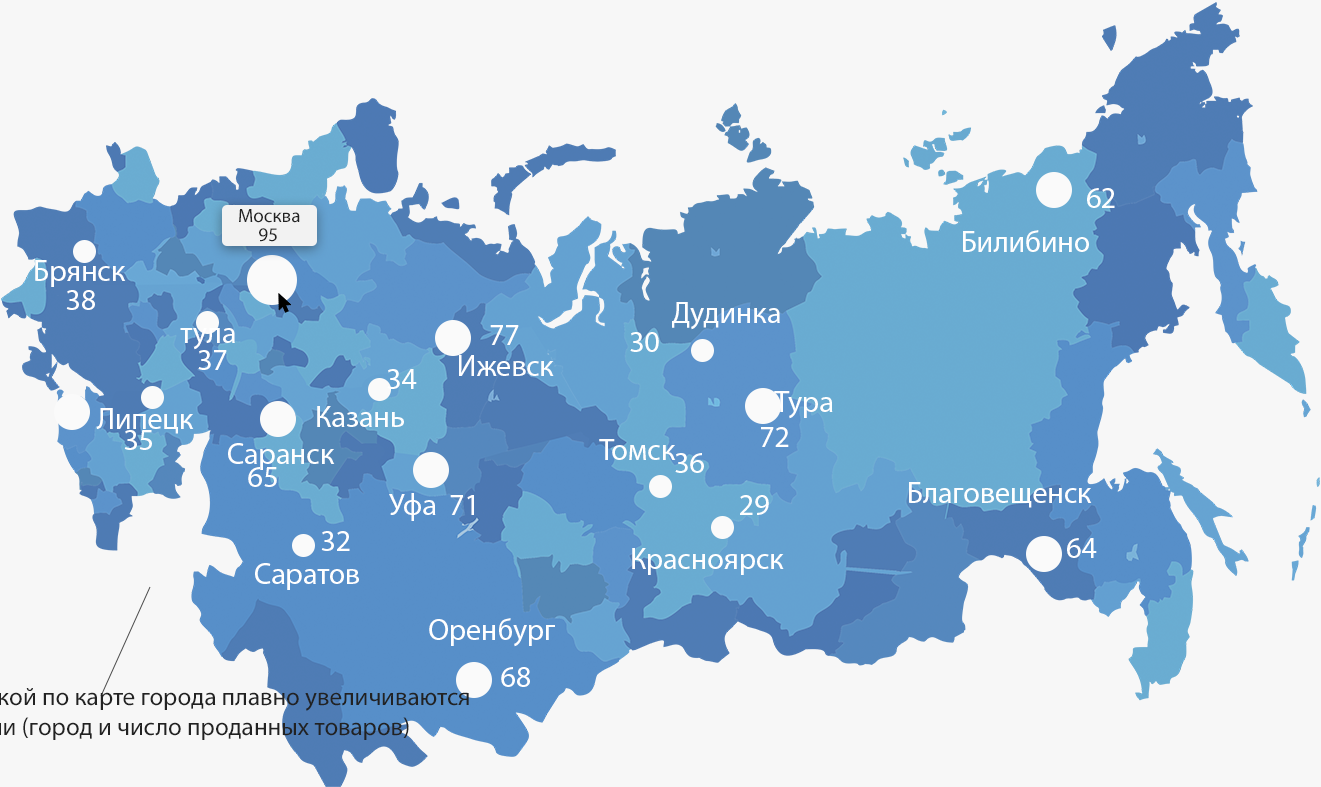
<style>
.page{position:relative;width:1321px;height:787px;background:#f7f7f7}
.page>*{position:absolute;margin:0}
.t1{font:30px "MyriadPro-Regular";color:#ffffff}
</style>
<div class="page">
<p class="t1" style="left:1087px;top:188px;width:28px;height:20px">62</p>
<p class="t1" style="left:963px;top:230px;width:126px;height:22px">Билибино</p>
<p class="t1" style="left:35px;top:260px;width:91px;height:27px">Брянск</p>
<p class="t1" style="left:66px;top:290px;width:29px;height:20px">38</p>
<p class="t1" style="left:672px;top:302px;width:108px;height:28px">Дудинка</p>
<p class="t1" style="left:180px;top:328px;width:55px;height:22px">тула</p>
<p class="t1" style="left:490px;top:325px;width:29px;height:20px">77</p>
<p class="t1" style="left:630px;top:332px;width:29px;height:20px">30</p>
<p class="t1" style="left:198px;top:350px;width:29px;height:20px">37</p>
<p class="t1" style="left:459px;top:355px;width:95px;height:21px">Ижевск</p>
<p class="t1" style="left:387px;top:369px;width:30px;height:20px">34</p>
<p class="t1" style="left:774px;top:391px;width:59px;height:28px">Тура</p>
<p class="t1" style="left:96px;top:408px;width:98px;height:26px">Липецк</p>
<p class="t1" style="left:317px;top:406px;width:87px;height:21px">Казань</p>
<p class="t1" style="left:124px;top:430px;width:28px;height:20px">35</p>
<p class="t1" style="left:761px;top:427px;width:28px;height:20px">72</p>
<p class="t1" style="left:228px;top:443px;width:107px;height:27px">Саранск</p>
<p class="t1" style="left:599px;top:439px;width:77px;height:21px">Томск</p>
<p class="t1" style="left:675px;top:453px;width:29px;height:20px">36</p>
<p class="t1" style="left:248px;top:467px;width:29px;height:20px">65</p>
<p class="t1" style="left:909px;top:482px;width:183px;height:26px">Благовещенск</p>
<p class="t1" style="left:389px;top:493px;width:47px;height:28px">Уфа</p>
<p class="t1" style="left:450px;top:495px;width:24px;height:20px">71</p>
<p class="t1" style="left:740px;top:495px;width:29px;height:20px">29</p>
<p class="t1" style="left:321px;top:531px;width:29px;height:20px">32</p>
<p class="t1" style="left:1067px;top:538px;width:30px;height:20px">64</p>
<p class="t1" style="left:632px;top:548px;width:152px;height:27px">Красноярск</p>
<p class="t1" style="left:255px;top:563px;width:104px;height:27px">Саратов</p>
<p class="t1" style="left:429px;top:618px;width:126px;height:29px">Оренбург</p>
<p class="t1" style="left:501px;top:667px;width:29px;height:20px">68</p>
</div>
